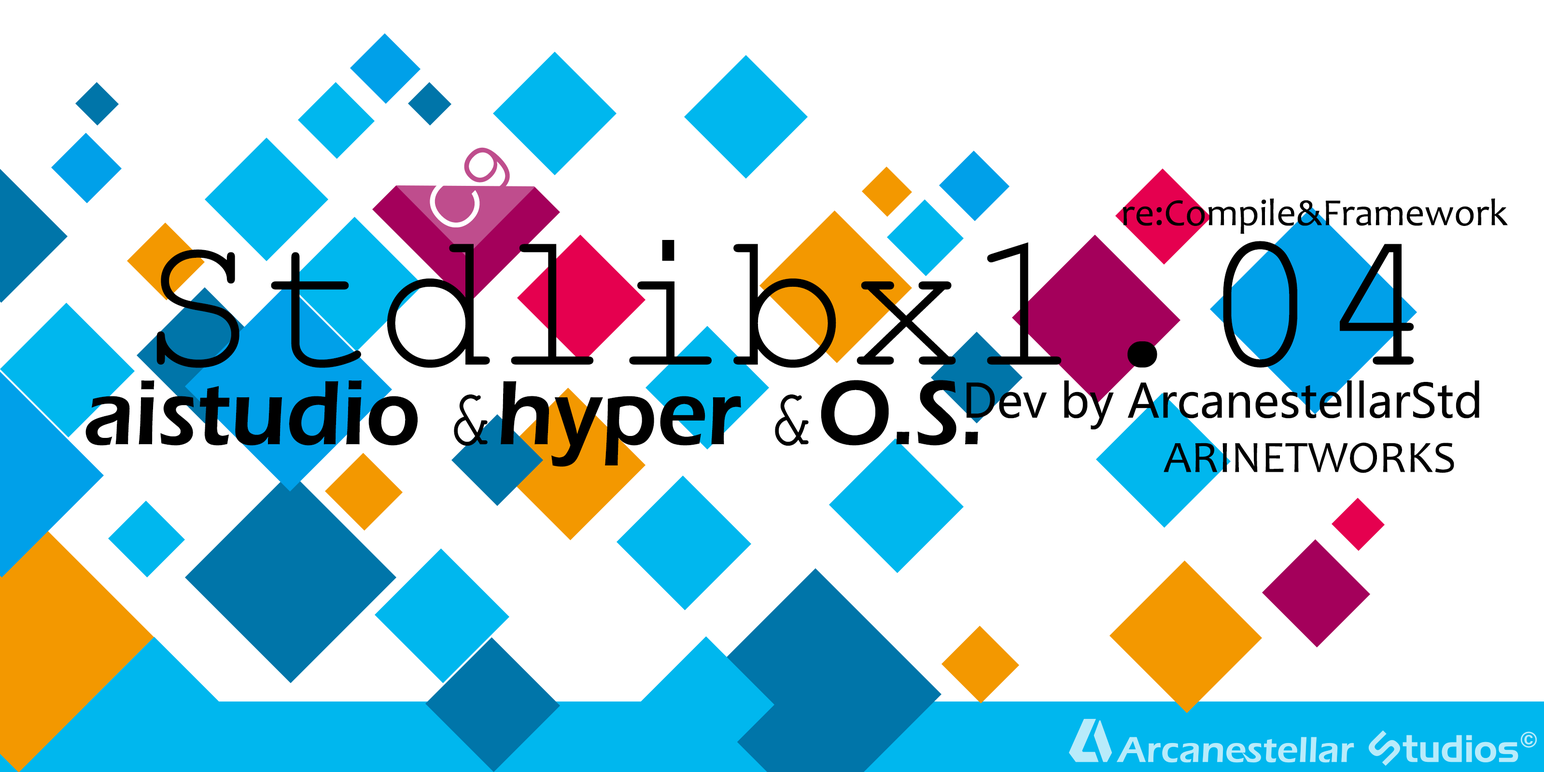
<style>
.page{position:relative;width:1544px;height:772px;background:#ffffff}
.page>*{position:absolute;margin:0}
.t1{font:38.5px "Candara";color:#000000}
.t2{font:196.7px "CourierNewPSMT";color:#000000}
.t3{font:94.5px "ErasITC-Demi";color:#000000;scale:0.94 1}
.t4{font:94.5px "CourierNewPSMT";color:#000000;scale:0.94 1}
.t5{font:46.4px "MicrosoftYaHei";color:#000000}
.t6{font:45.1px "Candara";color:#000000}
</style>
<div class="page">
<p class="t1" style="left:1123px;top:198px;width:385px;height:36px">re:Compile&amp;Framework</p>
<p class="t2" style="left:156px;top:240px;width:1258px;height:128px">Stdlibx1.04</p>
<p class="t3" style="left:85px;top:380px;width:893px;height:87px">aistudio <span class="t4">&amp;</span>hyper <span class="t4">&amp;</span>O.S.</p>
<p class="t5" style="left:967px;top:381px;width:513px;height:49px">Dev by ArcanestellarStd</p>
<p class="t6" style="left:1164px;top:442px;width:290px;height:31px">ARINETWORKS</p>
</div>
